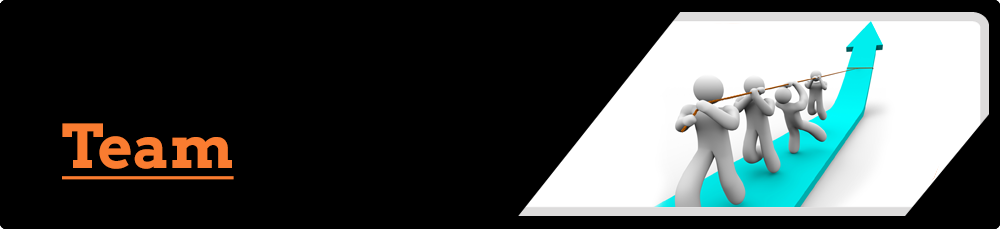
<style>
.page{position:relative;width:1000px;height:229px;background:#000000}
.page>*{position:absolute;margin:0}
.t1{font:60px "Arvo-Bold";color:#fa7c30;text-decoration:underline}
</style>
<div class="page">
<p class="t1" style="left:62px;top:123px;width:172px;height:57px">Team</p>
</div>
